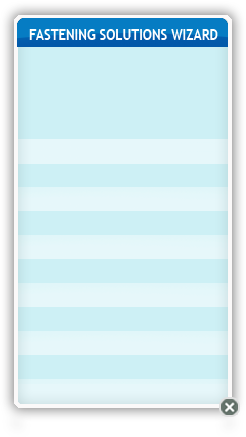
<style>
.page{position:relative;width:246px;height:437px;background:#cdf0f5}
.page>*{position:absolute;margin:0}
.t1{font:14px "TrebuchetMS-Bold";letter-spacing:0.01em;color:#ffffff;scale:0.91 1}
</style>
<div class="page">
<p class="t1" style="left:29px;top:29px;width:189px;height:11px">FASTENING SOLUTIONS WIZARD</p>
</div>
